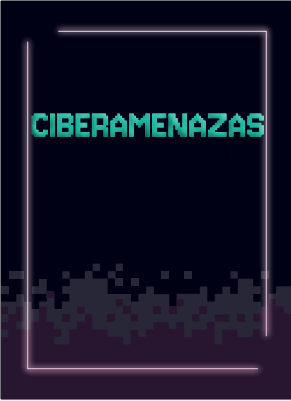
<style>
.page{position:relative;width:291px;height:401px;background:#000115}
.page>*{position:absolute;margin:0}
.t1{font:43.3px "Jersey10-Regular"}
</style>
<div class="page">
<p class="t1" style="left:31px;top:113px;width:233px;height:24px">CIBERAMENAZAS</p>
</div>
